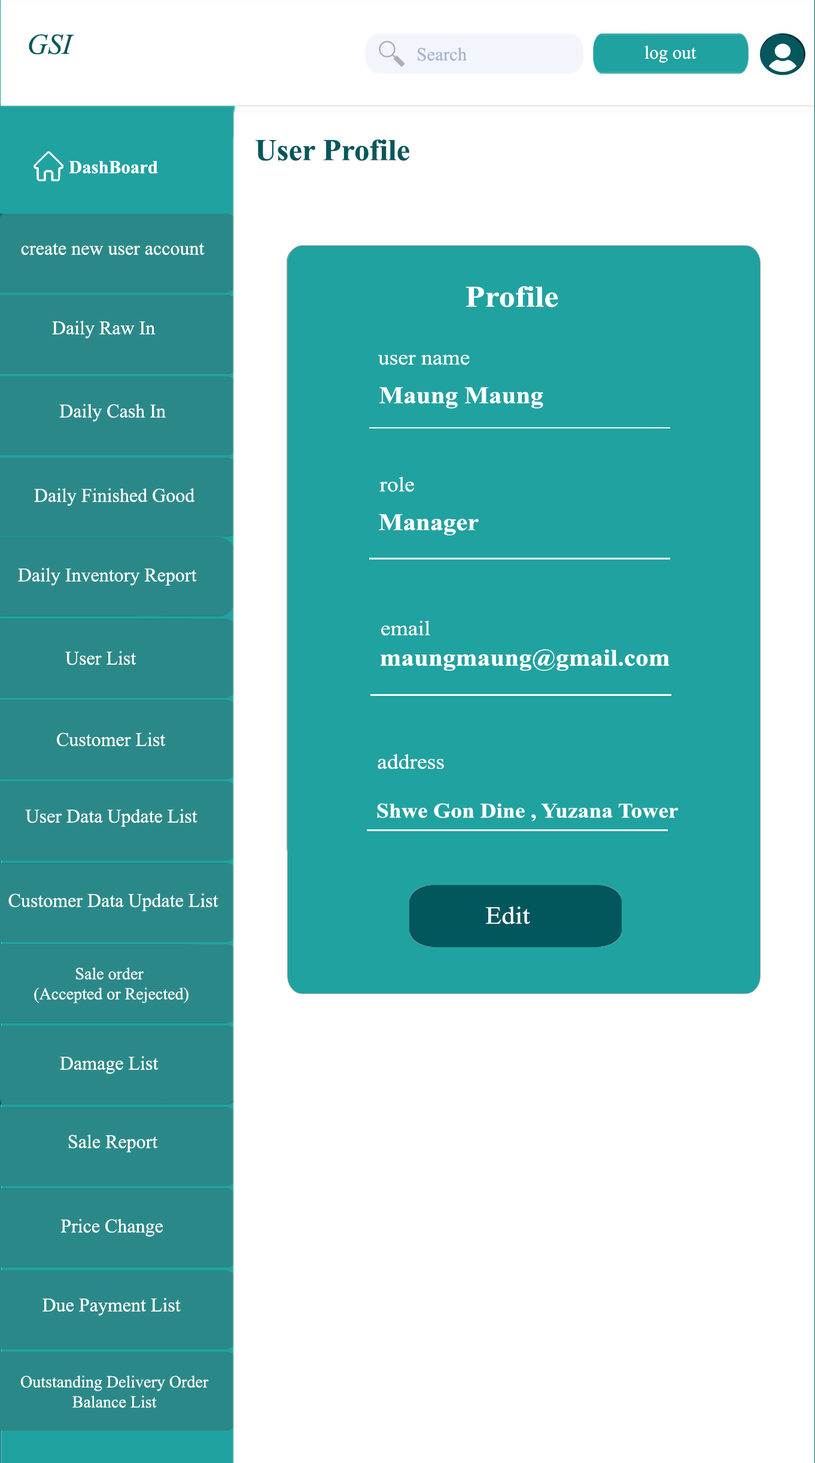
<style>
.page{position:relative;width:815px;height:1463px;background:#ffffff}
.page>*{position:absolute;margin:0}
.t1{font:28.7px "TimesNewRomanPS-ItalicMT";color:#02575c}
.t2{font:18.5px "TimesNewRomanPSMT";color:#a6b3d0}
.t3{font:18.5px "TimesNewRomanPSMT";color:#ffffff}
.t4{font:30.4px "TimesNewRomanPS-BoldMT";color:#02575c}
.t5{font:18.5px "TimesNewRomanPS-BoldMT";color:#ffffff}
.t6{font:19.1px "TimesNewRomanPSMT";color:#ffffff}
.t7{font:29.9px "TimesNewRomanPS-BoldMT";color:#ffffff;scale:1.09 1}
.t8{font:20.7px "TimesNewRomanPSMT";color:#ffffff;scale:1.09 1}
.t9{font:23.7px "TimesNewRomanPS-BoldMT";color:#ffffff;scale:1.09 1}
.t10{font:20.7px "TimesNewRomanPS-BoldMT";color:#ffffff;scale:1.09 1}
.t11{font:24.6px "TimesNewRomanPSMT";color:#ffffff;scale:1.09 1}
.t12{font:16.8px "TimesNewRomanPSMT";color:#ffffff}
</style>
<div class="page">
<p class="t1" style="left:29px;top:34px;width:45px;height:20px">GSI</p>
<p class="t2" style="left:418px;top:47px;width:49px;height:14px">Search</p>
<p class="t3" style="left:644px;top:45px;width:53px;height:18px">log out</p>
<p class="t4" style="left:256px;top:139px;width:153px;height:22px">User Profile</p>
<p class="t5" style="left:69px;top:161px;width:89px;height:13px">DashBoard</p>
<p class="t6" style="left:21px;top:243px;width:184px;height:12px">create new user account</p>
<p class="t7" style="left:466px;top:286px;width:92px;height:22px">Profile</p>
<p class="t6" style="left:52px;top:321px;width:104px;height:18px">Daily Raw In</p>
<p class="t8" style="left:378px;top:355px;width:92px;height:10px">user name</p>
<p class="t9" style="left:379px;top:387px;width:164px;height:22px">Maung Maung</p>
<p class="t6" style="left:59px;top:404px;width:107px;height:18px">Daily Cash In</p>
<p class="t8" style="left:379px;top:477px;width:35px;height:15px">role</p>
<p class="t6" style="left:34px;top:488px;width:161px;height:18px">Daily Finished Good</p>
<p class="t9" style="left:379px;top:514px;width:100px;height:22px">Manager</p>
<p class="t6" style="left:18px;top:568px;width:179px;height:18px">Daily Inventory Report</p>
<p class="t8" style="left:381px;top:621px;width:49px;height:14px">email</p>
<p class="t6" style="left:65px;top:651px;width:71px;height:14px">User List</p>
<p class="t9" style="left:381px;top:649px;width:289px;height:22px">maungmaung@gmail.com</p>
<p class="t6" style="left:57px;top:732px;width:109px;height:14px">Customer List</p>
<p class="t8" style="left:378px;top:754px;width:66px;height:15px">address</p>
<p class="t6" style="left:25px;top:809px;width:172px;height:18px">User Data Update List</p>
<p class="t10" style="left:377px;top:803px;width:302px;height:19px">Shwe Gon Dine , Yuzana Tower</p>
<p class="t6" style="left:8px;top:893px;width:210px;height:18px">Customer Data Update List</p>
<p class="t11" style="left:485px;top:907px;width:45px;height:18px">Edit</p>
<p class="t12" style="left:34px;top:968px;width:154px;height:36px;text-align:center">Sale order <br>(Accepted or Rejected)</p>
<p class="t6" style="left:60px;top:1056px;width:99px;height:18px">Damage List</p>
<p class="t6" style="left:68px;top:1135px;width:90px;height:18px">Sale Report</p>
<p class="t6" style="left:60px;top:1219px;width:103px;height:18px">Price Change</p>
<p class="t6" style="left:42px;top:1298px;width:139px;height:18px">Due Payment List</p>
<p class="t12" style="left:20px;top:1376px;width:189px;height:32px;text-align:center">Outstanding Delivery Order<br>Balance List</p>
</div>
